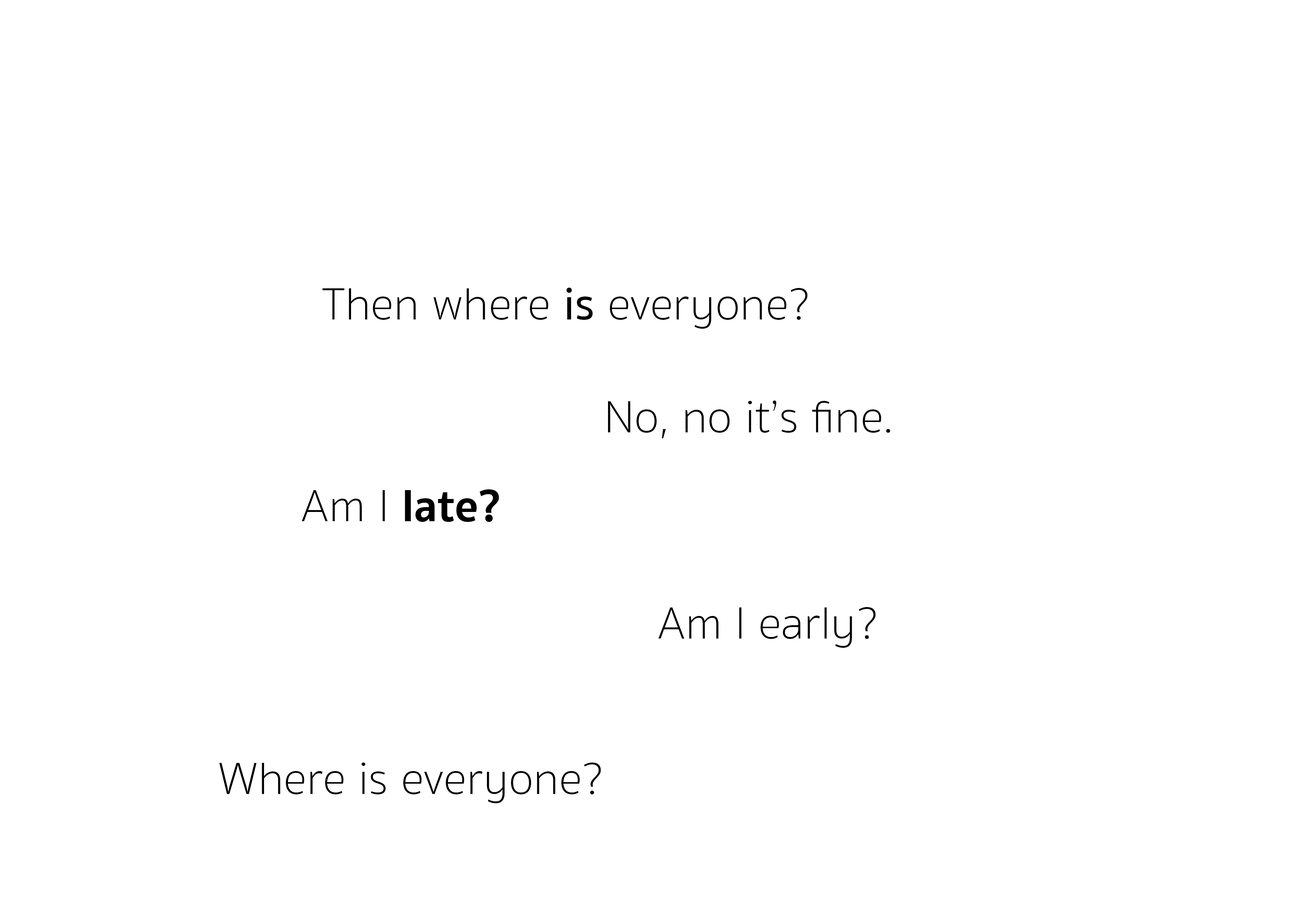
<style>
.page{position:relative;width:1299px;height:918px;background:#ffffff}
.page>*{position:absolute;margin:0}
.t1{font:46.3px "SukhumvitSet-Thin";color:#000000}
.t2{font:46.3px "SukhumvitSet-Medium";color:#000000}
.t3{font:46.3px "SukhumvitSet-Bold";color:#000000}
</style>
<div class="page">
<p class="t1" style="left:322px;top:288px;width:485px;height:41px">Then where <span class="t2">is</span> everyone?</p>
<p class="t1" style="left:608px;top:401px;width:282px;height:37px">No, no it’s fine.</p>
<p class="t3" style="left:302px;top:489px;width:197px;height:33px"><span class="t1">Am I </span>late?</p>
<p class="t1" style="left:658px;top:607px;width:218px;height:41px">Am I early?</p>
<p class="t1" style="left:219px;top:763px;width:382px;height:40px">Where is everyone?</p>
</div>
